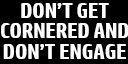
<style>
.page{position:relative;width:128px;height:64px;background:#000000}
.page>*{position:absolute;margin:0}
.t1{font:20.2px/20.2px "HPSimplified-Bold";letter-spacing:-0.01em;color:#ffffff}
</style>
<div class="page">
<p class="t1" style="left:1px;top:3px;width:128px;height:56px;text-align:center">DON’T GET<br>CORNERED AND<br>DON’T ENGAGE</p>
</div>
